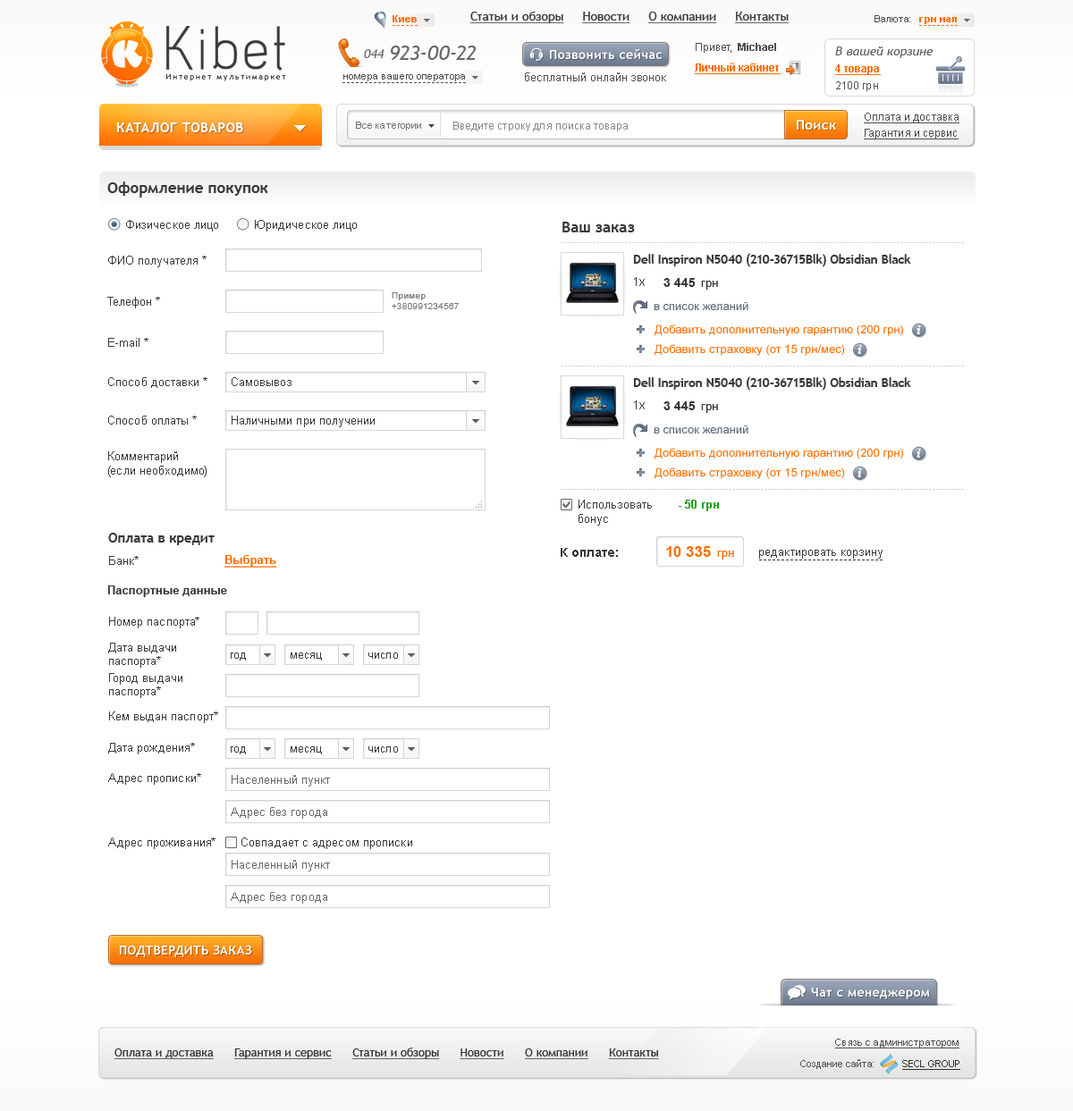
<style>
.page{position:relative;width:1073px;height:1111px;background:#ffffff}
.page>*{position:absolute;margin:0}
.t1{font:9.8px "Arial-BoldMT";color:#ff6e01}
.t2{font:12.5px "TrebuchetMS";color:#393939;text-decoration:underline}
.t3{font:9.8px "ArialMT";color:#4f4f4f}
.t4{font:78.2px "Acid";color:#3b3b3b}
.t5{font:12.5px "TrebuchetMS-Italic";color:#696969}
.t6{font:20.6px "TrebuchetMS-Italic";color:#696969}
.t7{font:12.5px "TrebuchetMS-Bold";letter-spacing:0.03em;color:#ffffff}
.t8{font:10.7px "ArialMT";color:#4f4f4f}
.t9{font:10.7px "Arial-BoldMT";color:#4f4f4f}
.t10{font:12.5px "TrebuchetMS-Italic";color:#616161}
.t11{font:10.7px "Arial-BoldMT";color:#ff6e01;text-decoration:underline}
.t12{font:7.9px "TrebuchetMS";letter-spacing:0.2em;color:#060606}
.t13{font:11.6px "ArialMT";color:#4f4f4f}
.t14{font:10.7px "ArialMT";color:#535353}
.t15{font:10.7px "ArialMT";color:#4f4f4f;text-decoration:underline}
.t16{font:13.4px "TrebuchetMS-Bold";letter-spacing:0.03em;color:#ffffff}
.t17{font:9.8px "ArialMT";color:#727272}
.t18{font:10.7px "ArialMT";color:#888888}
.t19{font:15.2px "TrebuchetMS-Bold";color:#393939}
.t20{font:11.6px "ArialMT";color:#393939}
.t21{font:12.1px "TrebuchetMS-Bold";color:#393939}
.t22{font:12.5px "ArialMT";letter-spacing:0.02em;color:#393939}
.t23{font:12.5px "Arial-BoldMT";color:#393939}
.t24{font:8.9px "ArialMT";letter-spacing:0.02em;color:#797979}
.t25{font:11.6px "ArialMT";color:#5d6676}
.t26{font:11.6px "ArialMT";color:#ff6e01}
.t27{font:13.4px "ChaparralPro-BoldIt";color:#ffffff}
.t28{font:11.6px/14.3px "ArialMT";color:#393939}
.t29{font:11.6px "Arial-BoldMT";color:#1ea218}
.t30{font:13.4px "TrebuchetMS-Bold";color:#393939}
.t31{font:11.6px "Arial-BoldMT";color:#ff6e01;text-decoration:underline}
.t32{font:15.2px "Arial-BoldMT";color:#ff6e01}
.t33{font:11.6px "Arial-BoldMT";color:#393939}
.t34{font:11.6px/13.4px "ArialMT";color:#393939}
.t35{font:10.7px "ArialMT";color:#393939}
.t36{font:11.6px "ArialMT";color:#666666}
.t37{font:12.5px "TrebuchetMS-Bold";letter-spacing:0.02em;color:#ffffff}
.t38{font:11.6px "TrebuchetMS";color:#393939;text-decoration:underline}
.t39{font:9.8px "ArialMT";color:#4f4f4f;text-decoration:underline}
.t40{font:9.8px "ArialMT";color:#303030;text-decoration:underline}
</style>
<div class="page">
<p class="t1" style="left:393px;top:15px;width:24px;height:7px">Киев</p>
<p class="t2" style="left:470px;top:12px;width:319px;height:11px">Статьи и обзоры     Новости     О компании     Контакты</p>
<p class="t3" style="left:874px;top:15px;width:36px;height:7px">Валюта:</p>
<p class="t1" style="left:919px;top:17px;width:38px;height:7px">грн нал</p>
<p class="t4" style="left:166px;top:26px;width:119px;height:45px">Kibet</p>
<p class="t5" style="left:364px;top:49px;width:20px;height:9px">044</p>
<p class="t6" style="left:391px;top:46px;width:86px;height:14px">923-00-22</p>
<p class="t7" style="left:550px;top:48px;width:112px;height:11px">Позвонить сейчас</p>
<p class="t8" style="left:696px;top:43px;width:80px;height:10px">Привет,  <span class="t9">Michael</span></p>
<p class="t10" style="left:835px;top:46px;width:98px;height:12px">В вашей корзине</p>
<p class="t11" style="left:695px;top:63px;width:86px;height:11px">Личный кабинет</p>
<p class="t11" style="left:835px;top:64px;width:46px;height:11px">4 товара</p>
<p class="t12" style="left:166px;top:73px;width:120px;height:8px">Интернет мультимаркет</p>
<p class="t3" style="left:343px;top:74px;width:122px;height:7px">номера вашего оператора</p>
<p class="t13" style="left:525px;top:72px;width:141px;height:9px">бесплатный онлайн звонок</p>
<p class="t14" style="left:836px;top:81px;width:42px;height:10px">2100 грн</p>
<p class="t15" style="left:864px;top:113px;width:95px;height:10px">Оплата и доставка</p>
<p class="t16" style="left:116px;top:122px;width:127px;height:10px">КАТАЛОГ ТОВАРОВ</p>
<p class="t17" style="left:356px;top:122px;width:65px;height:9px">Все категории</p>
<p class="t18" style="left:453px;top:122px;width:175px;height:9px">Введите строку для поиска товара</p>
<p class="t16" style="left:797px;top:120px;width:39px;height:10px">Поиск</p>
<p class="t15" style="left:864px;top:129px;width:94px;height:10px">Гарантия и сервис</p>
<p class="t19" style="left:107px;top:182px;width:161px;height:16px">Оформление покупок</p>
<p class="t20" style="left:126px;top:220px;width:92px;height:12px">Физическое лицо</p>
<p class="t20" style="left:255px;top:220px;width:102px;height:12px">Юридическое лицо</p>
<p class="t19" style="left:562px;top:222px;width:73px;height:10px">Ваш заказ</p>
<p class="t20" style="left:108px;top:256px;width:99px;height:11px">ФИО получателя *</p>
<p class="t21" style="left:633px;top:253px;width:278px;height:14px">Dell Inspiron N5040 (210-36715Blk) Obsidian Black</p>
<p class="t22" style="left:634px;top:277px;width:11px;height:9px">1x</p>
<p class="t23" style="left:663px;top:278px;width:55px;height:12px">3 445  <span class="t20">грн</span></p>
<p class="t24" style="left:392px;top:292px;width:67px;height:17px">Пример<br>+380991234567</p>
<p class="t20" style="left:107px;top:297px;width:53px;height:11px">Телефон *</p>
<p class="t25" style="left:654px;top:301px;width:94px;height:9px">в список желаний</p>
<p class="t26" style="left:654px;top:325px;width:249px;height:11px">Добавить дополнительную гарантию (200 грн)</p>
<p class="t27" style="left:916px;top:325px;width:5px;height:9px">i</p>
<p class="t20" style="left:108px;top:338px;width:40px;height:9px">E-mail *</p>
<p class="t26" style="left:654px;top:344px;width:191px;height:12px">Добавить страховку (от 15 грн/мес)</p>
<p class="t27" style="left:857px;top:345px;width:5px;height:9px">i</p>
<p class="t20" style="left:108px;top:377px;width:99px;height:11px">Способ доставки *</p>
<p class="t20" style="left:232px;top:377px;width:59px;height:9px">Самовывоз</p>
<p class="t21" style="left:633px;top:376px;width:278px;height:15px">Dell Inspiron N5040 (210-36715Blk) Obsidian Black</p>
<p class="t22" style="left:634px;top:401px;width:11px;height:9px">1x</p>
<p class="t23" style="left:663px;top:401px;width:55px;height:12px">3 445  <span class="t20">грн</span></p>
<p class="t20" style="left:108px;top:416px;width:89px;height:9px">Способ оплаты *</p>
<p class="t20" style="left:232px;top:416px;width:143px;height:11px">Наличными при получении</p>
<p class="t25" style="left:654px;top:425px;width:94px;height:9px">в список желаний</p>
<p class="t26" style="left:654px;top:448px;width:249px;height:12px">Добавить дополнительную гарантию (200 грн)</p>
<p class="t27" style="left:916px;top:449px;width:5px;height:9px">i</p>
<p class="t28" style="left:108px;top:452px;width:99px;height:25px">Комментарий<br>(если необходимо)</p>
<p class="t26" style="left:654px;top:468px;width:191px;height:11px">Добавить страховку (от 15 грн/мес)</p>
<p class="t27" style="left:857px;top:469px;width:5px;height:8px">i</p>
<p class="t20" style="left:578px;top:500px;width:74px;height:26px">Использовать<br>бонус</p>
<p class="t29" style="left:679px;top:500px;width:40px;height:11px">- 50 грн</p>
<p class="t30" style="left:108px;top:533px;width:107px;height:12px">Оплата в кредит</p>
<p class="t20" style="left:109px;top:556px;width:30px;height:9px">Банк*</p>
<p class="t31" style="left:224px;top:555px;width:53px;height:13px">Выбрать</p>
<p class="t23" style="left:561px;top:548px;width:57px;height:9px">К оплате:</p>
<p class="t32" style="left:666px;top:546px;width:68px;height:14px">10 335  <span class="t26">грн</span></p>
<p class="t20" style="left:759px;top:550px;width:123px;height:9px">редактировать корзину</p>
<p class="t33" style="left:107px;top:586px;width:120px;height:11px">Паспортные данные</p>
<p class="t20" style="left:109px;top:617px;width:90px;height:12px">Номер паспорта*</p>
<p class="t34" style="left:108px;top:643px;width:68px;height:25px">Дата выдачи<br>паспорта*</p>
<p class="t35" style="left:231px;top:653px;width:15px;height:8px">год</p>
<p class="t35" style="left:291px;top:653px;width:31px;height:8px">месяц</p>
<p class="t35" style="left:368px;top:653px;width:30px;height:6px">число</p>
<p class="t34" style="left:109px;top:673px;width:73px;height:25px">Город выдачи<br>паспорта*</p>
<p class="t20" style="left:109px;top:712px;width:109px;height:11px">Кем выдан паспорт*</p>
<p class="t20" style="left:108px;top:743px;width:87px;height:12px">Дата рождения*</p>
<p class="t35" style="left:231px;top:747px;width:15px;height:8px">год</p>
<p class="t35" style="left:291px;top:747px;width:31px;height:8px">месяц</p>
<p class="t35" style="left:368px;top:747px;width:30px;height:6px">число</p>
<p class="t20" style="left:108px;top:773px;width:93px;height:12px">Адрес прописки*</p>
<p class="t36" style="left:232px;top:775px;width:98px;height:12px">Населенный пункт</p>
<p class="t36" style="left:231px;top:807px;width:96px;height:12px">Адрес без города</p>
<p class="t20" style="left:108px;top:838px;width:107px;height:11px">Адрес проживания*</p>
<p class="t20" style="left:241px;top:838px;width:171px;height:11px">Совпадает с адресом прописки</p>
<p class="t36" style="left:232px;top:860px;width:98px;height:12px">Населенный пункт</p>
<p class="t36" style="left:231px;top:892px;width:96px;height:12px">Адрес без города</p>
<p class="t37" style="left:120px;top:945px;width:132px;height:13px">ПОДТВЕРДИТЬ ЗАКАЗ</p>
<p class="t7" style="left:811px;top:988px;width:119px;height:12px">Чат с менеджером</p>
<p class="t38" style="left:114px;top:1048px;width:545px;height:12px">Оплата и доставка      Гарантия и сервис      Статьи и обзоры      Новости      О компании      Контакты</p>
<p class="t39" style="left:835px;top:1039px;width:124px;height:10px">Связь с администратором</p>
<p class="t3" style="left:800px;top:1060px;width:74px;height:9px">Создание сайта:</p>
<p class="t40" style="left:902px;top:1060px;width:58px;height:10px">SECL GROUP</p>
</div>
